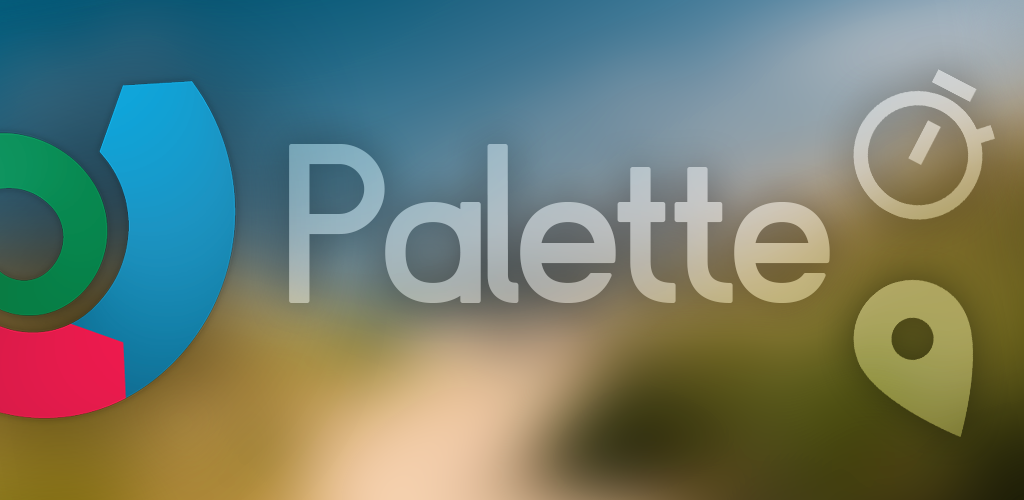
<style>
.page{position:relative;width:1024px;height:500px}
.page>*{position:absolute;margin:0}
.t1{font:245px "FibelSued-Bold"}
</style>
<div class="page">
<p class="t1" style="left:289px;top:144px;width:541px;height:159px">Palette</p>
</div>
